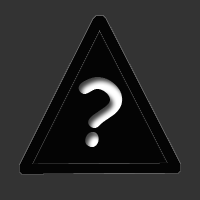
<style>
.page{position:relative;width:200px;height:200px;background:#333333}
.page>*{position:absolute;margin:0}
.t1{font:90px "ComicSansMS-Bold"}
</style>
<div class="page">
<p class="t1" style="left:78px;top:77px;width:45px;height:70px">?</p>
</div>
